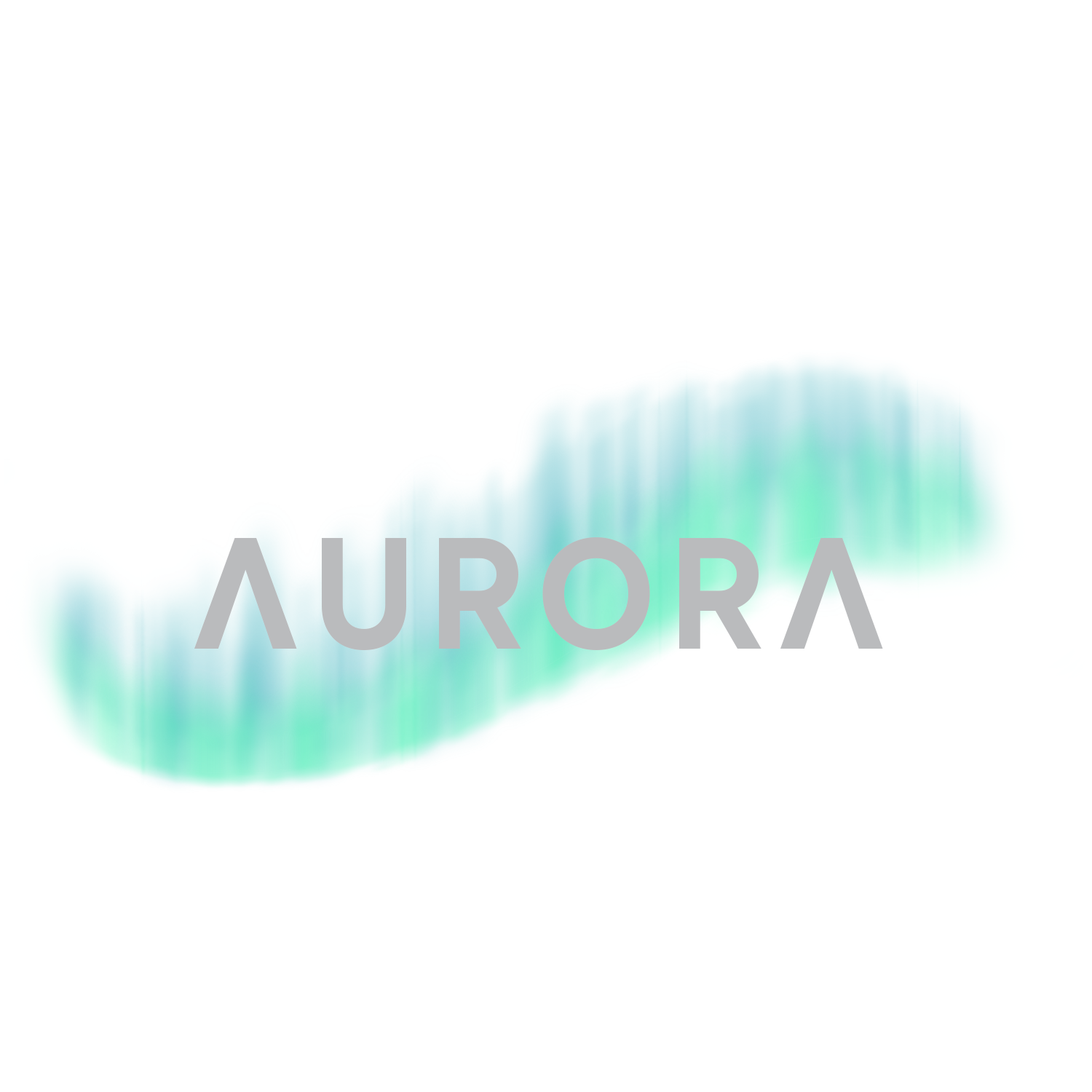
<style>
.page{position:relative;width:1092px;height:1092px;background:#ffffff}
.page>*{position:absolute;margin:0}
.t1{font:157.7px "MADEEvolveSans-Bold";letter-spacing:0.1em;color:#babbbd}
.t2{font:157.7px "MADEEvolveSansEVO-Bold";letter-spacing:0.1em;color:#babbbd}
</style>
<div class="page">
<p class="t1" style="left:194px;top:537px;width:689px;height:113px"><span class="t2">A</span>UROR<span class="t2">A</span></p>
</div>
